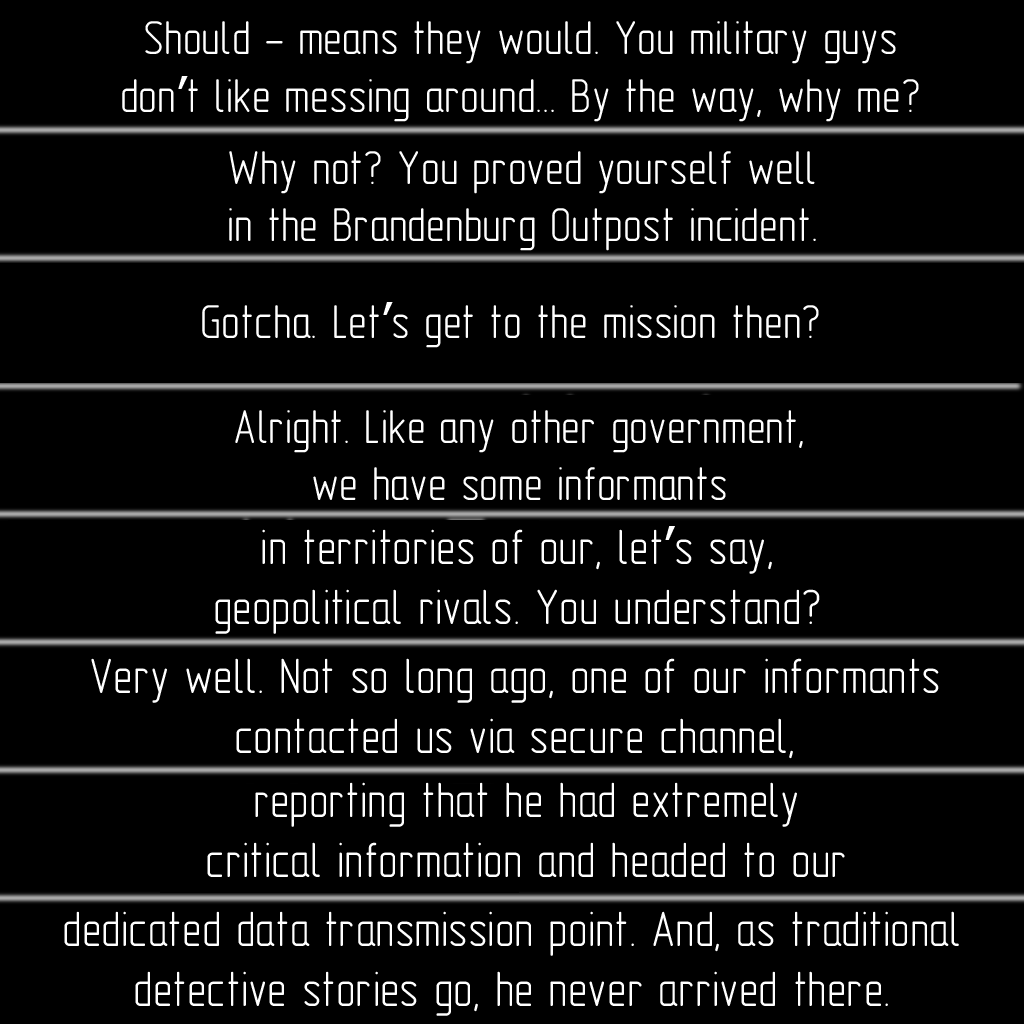
<style>
.page{position:relative;width:1024px;height:1024px;background:#000000}
.page>*{position:absolute;margin:0}
.t1{font:48px "GOST-2.304-81typeA";color:#ffffff}
.t2{font:48px "Tahoma";color:#ffffff}
.t3{font:50px "GOST-2.304-81typeA";color:#ffffff}
.t4{font:50px "Tahoma";color:#ffffff}
</style>
<div class="page">
<p class="t1" style="left:122px;top:21px;width:797px;height:101px;text-align:center">Should - means they would. You military guys<br>don<span class="t2">’</span>t like messing around... By the way, why me?</p>
<p class="t1" style="left:229px;top:151px;width:587px;height:100px;text-align:center">Why not? You proved yourself well<br>in the Brandenburg Outpost incident.</p>
<p class="t1" style="left:202px;top:302px;width:617px;height:46px">Gotcha. Let<span class="t2">’</span>s get to the mission then?</p>
<p class="t1" style="left:235px;top:410px;width:568px;height:90px;text-align:center">Alright. Like any other government,<br>we have some informants</p>
<p class="t3" style="left:215px;top:526px;width:605px;height:108px;text-align:center">in territories of our, let<span class="t4">’</span>s say,<br>geopolitical rivals. You understand?</p>
<p class="t3" style="left:91px;top:658px;width:848px;height:101px;text-align:center">Very well. Not so long ago, one of our informants<br>contacted us via secure channel,</p>
<p class="t3" style="left:207px;top:782px;width:638px;height:95px;text-align:center">reporting that he had extremely<br>critical information and headed to our</p>
<p class="t3" style="left:64px;top:911px;width:895px;height:105px;text-align:center">dedicated data transmission point. And, as traditional<br>detective stories go, he never arrived there.</p>
</div>
